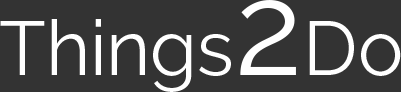
<style>
.page{position:relative;width:401px;height:92px;background:#333333}
.page>*{position:absolute;margin:0}
.t1{font:76.3px "Raleway-Regular";color:#ffffff}
.t2{font:129.8px "Raleway-Regular";color:#ffffff}
</style>
<div class="page">
<p class="t1" style="left:0px;top:0px;width:401px;height:92px">Things<span class="t2">2</span>Do</p>
</div>
